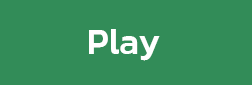
<style>
.page{position:relative;width:252px;height:85px;background:#328c58}
.page>*{position:absolute;margin:0}
.t1{font:36px "Kanit-Medium";color:#ffffff}
</style>
<div class="page">
<p class="t1" style="left:89px;top:29px;width:71px;height:32px">Play</p>
</div>
